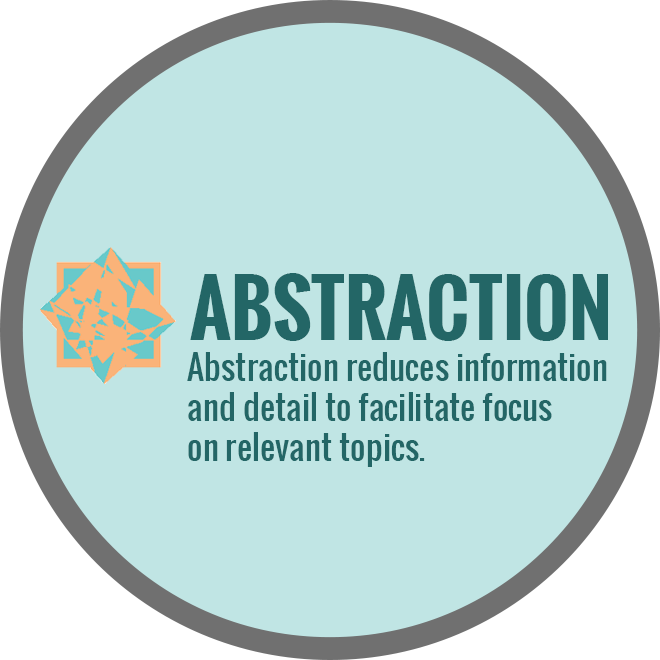
<style>
.page{position:relative;width:660px;height:660px;background:#c0e5e4}
.page>*{position:absolute;margin:0}
.t1{font:75px "Oswald-Bold";color:#236666}
.t2{font:33.3px "Oswald-Regular";color:#236666}
</style>
<div class="page">
<p class="t1" style="left:190px;top:273px;width:418px;height:68px">ABSTRACTION</p>
<p class="t2" style="left:187px;top:352px;width:420px;height:115px">Abstraction reduces information<br>and detail to facilitate focus<br>on relevant topics.</p>
</div>
